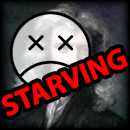
<style>
.page{position:relative;width:130px;height:130px}
.page>*{position:absolute;margin:0}
.t1{font:29.3px "MyriadHebrew-Bold";color:#ff0000}
</style>
<div class="page">
<p class="t1" style="left:1px;top:48px;width:127px;height:68px;rotate:-23deg">STARVING</p>
</div>
